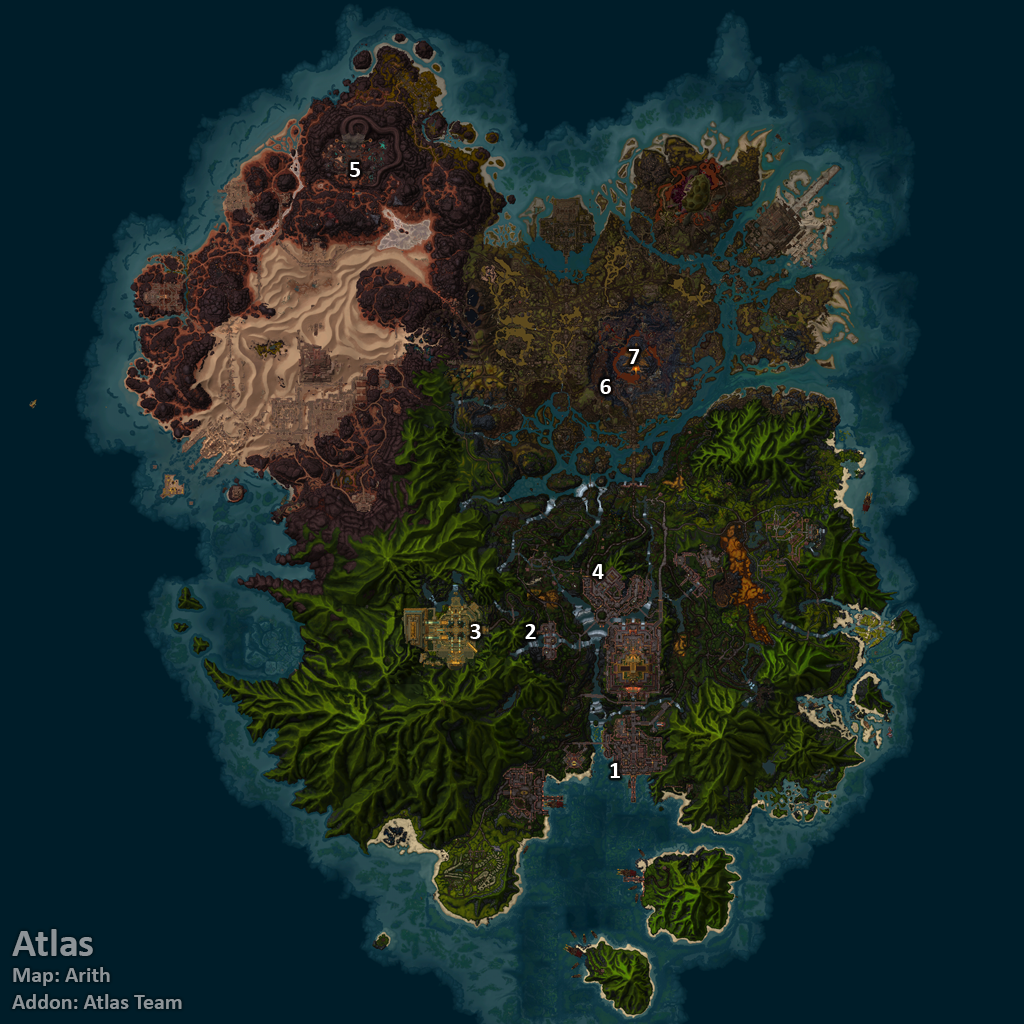
<style>
.page{position:relative;width:1024px;height:1024px;background:#001d29}
.page>*{position:absolute;margin:0}
.t1{font:24px "Calibri-Bold";color:#ffffff}
.t2{font:22px "Calibri-Bold";color:#8d9397}
.t3{font:40px "Calibri-Bold";color:#8d9397}
</style>
<div class="page">
<p class="t1" style="left:350px;top:162px;width:10px;height:15px">5</p>
<p class="t1" style="left:629px;top:349px;width:11px;height:15px">7</p>
<p class="t1" style="left:600px;top:379px;width:11px;height:15px">6</p>
<p class="t1" style="left:592px;top:564px;width:12px;height:15px">4</p>
<p class="t1" style="left:470px;top:624px;width:11px;height:15px">3</p>
<p class="t1" style="left:525px;top:624px;width:11px;height:15px">2</p>
<p class="t1" style="left:610px;top:763px;width:10px;height:15px">1</p>
<p class="t2" style="left:12px;top:929px;width:170px;height:80px"><span class="t3">Atlas<br></span>Map: Arith<br>Addon: Atlas Team</p>
</div>
